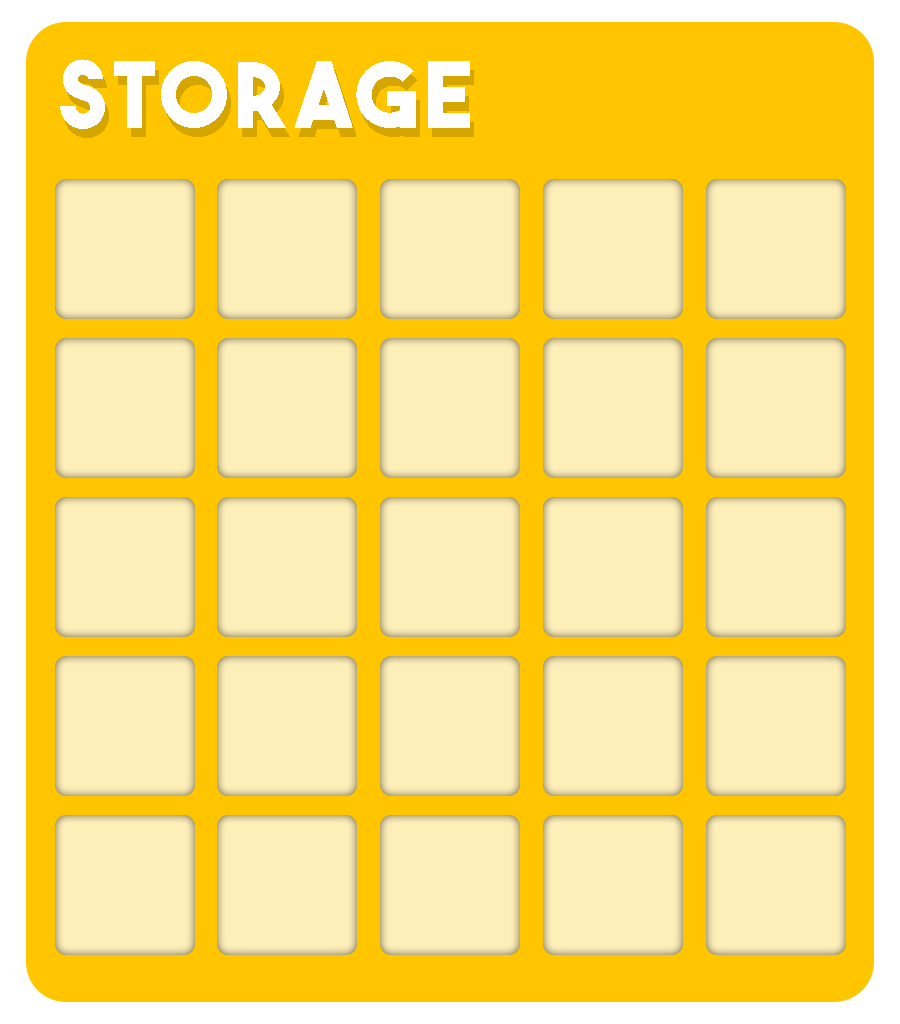
<style>
.page{position:relative;width:900px;height:1024px;background:#feeeb8}
.page>*{position:absolute;margin:0}
.t1{font:91.3px "TheBoldFont";letter-spacing:0.05em;color:#ffffff}
</style>
<div class="page">
<p class="t1" style="left:60px;top:59px;width:410px;height:70px">Storage</p>
</div>
